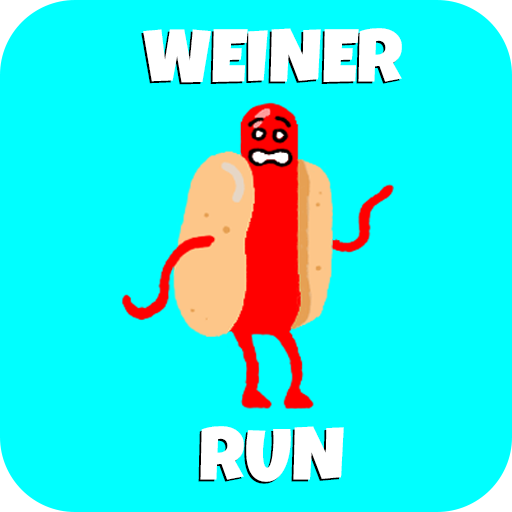
<style>
.page{position:relative;width:512px;height:512px;background:#00ffff}
.page>*{position:absolute;margin:0}
.t1{font:75px "LuckiestGuy-Regular";color:#ffffff}
</style>
<div class="page">
<p class="t1" style="left:141px;top:30px;width:259px;height:55px">WEINER</p>
<p class="t1" style="left:143px;top:28px;width:259px;height:55px">WEINER</p>
<p class="t1" style="left:198px;top:428px;width:144px;height:56px">rUN</p>
<p class="t1" style="left:200px;top:426px;width:144px;height:56px">rUN</p>
</div>
